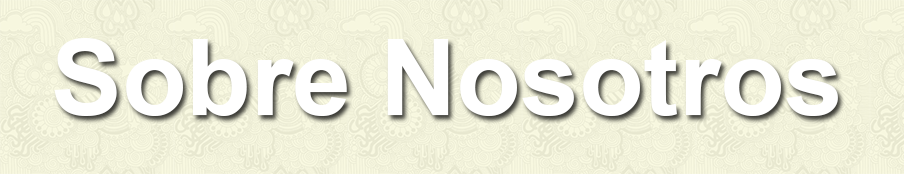
<style>
.page{position:relative;width:904px;height:174px}
.page>*{position:absolute;margin:0}
.t1{font:105.5px "Arial-BoldMT";color:#ffffff}
</style>
<div class="page">
<p class="t1" style="left:54px;top:38px;width:784px;height:78px">Sobre Nosotros</p>
</div>
